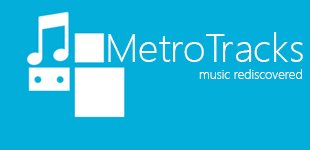
<style>
.page{position:relative;width:310px;height:150px;background:#04aeda}
.page>*{position:absolute;margin:0}
.t1{font:40px "SegoeUI-Light";color:#ffffff}
.t2{font:13px "SegoeUI-Light";color:#ffffff}
</style>
<div class="page">
<p class="t1" style="left:108px;top:32px;width:195px;height:30px">MetroTracks</p>
<p class="t2" style="left:199px;top:69px;width:103px;height:10px">music rediscovered</p>
</div>
